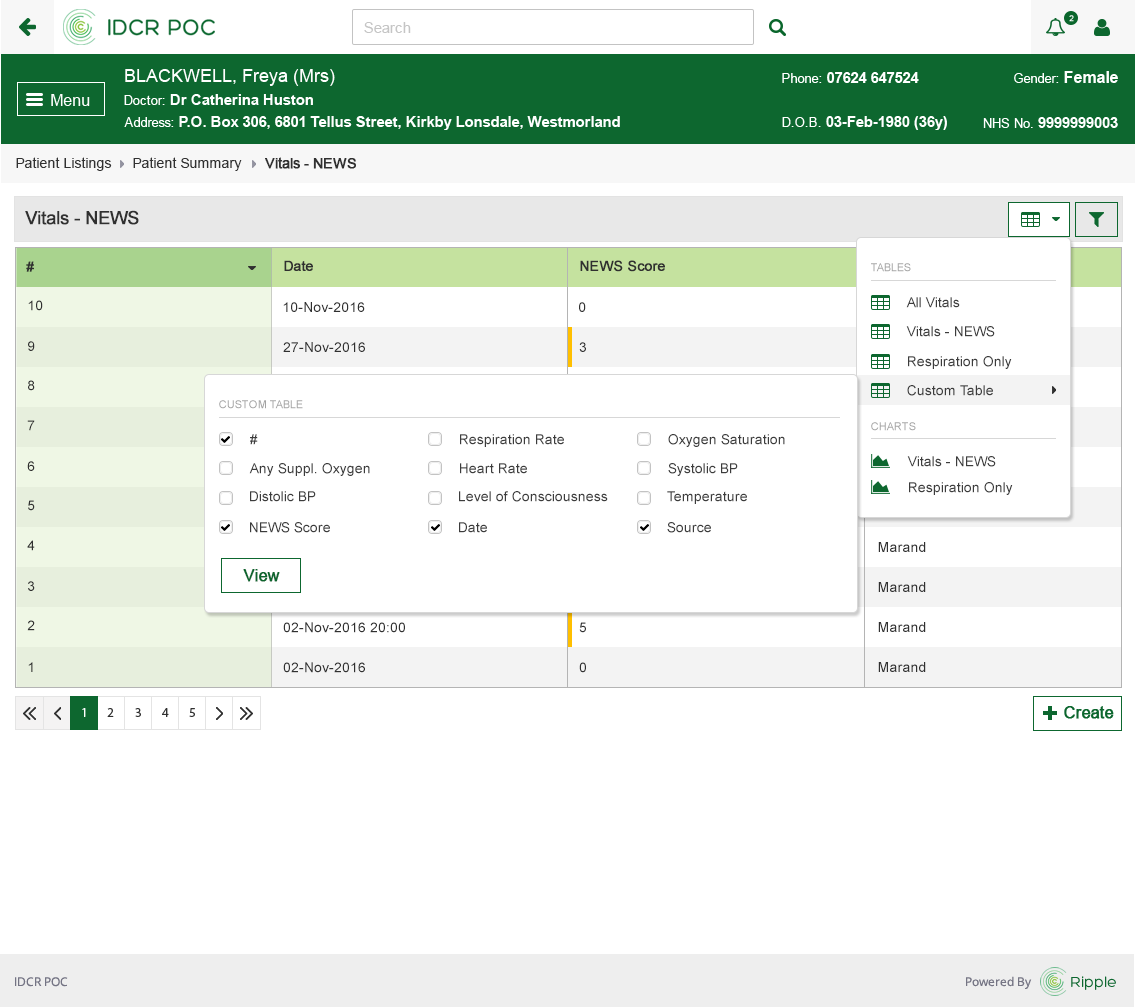
<style>
.page{position:relative;width:1135px;height:1007px;background:#ffffff}
.page>*{position:absolute;margin:0}
.t1{font:14px "ArialMT";color:#313131}
.t2{font:14px "ArialMT";color:#313131;font-weight:bold}
.t3{font:18px "ArialMT";color:#303030;font-weight:bold}
.t4{font:14px "ArialMT";color:#303030;font-weight:bold}
.t5{font:11px "ArialMT";color:#a3a3a3}
.t6{font:14px "ArialMT";color:#303030}
.t7{font:14px "ArialMT";color:#3c3c3c}
.t8{font:16px "ArialMT";color:#0c662e;font-weight:bold}
</style>
<div class="page">
<p class="t1" style="left:16px;top:157px;width:96px;height:14px">Patient Listings</p>
<p class="t1" style="left:133px;top:157px;width:109px;height:14px">Patient Summary</p>
<p class="t2" style="left:265px;top:157px;width:91px;height:12px">Vitals - NEWS</p>
<p class="t3" style="left:25px;top:210px;width:114px;height:15px">Vitals - NEWS</p>
<p class="t4" style="left:26px;top:261px;width:8px;height:11px">#</p>
<p class="t4" style="left:284px;top:260px;width:29px;height:11px">Date</p>
<p class="t4" style="left:580px;top:260px;width:85px;height:12px">NEWS Score</p>
<p class="t5" style="left:871px;top:263px;width:40px;height:9px">TABLES</p>
<p class="t6" style="left:28px;top:300px;width:15px;height:11px">10</p>
<p class="t6" style="left:283px;top:302px;width:82px;height:10px">10-Nov-2016</p>
<p class="t6" style="left:579px;top:302px;width:7px;height:10px">0</p>
<p class="t7" style="left:906px;top:297px;width:54px;height:11px">All Vitals</p>
<p class="t7" style="left:906px;top:326px;width:89px;height:11px">Vitals - NEWS</p>
<p class="t6" style="left:28px;top:341px;width:7px;height:10px">9</p>
<p class="t6" style="left:283px;top:342px;width:82px;height:10px">27-Nov-2016</p>
<p class="t6" style="left:579px;top:342px;width:7px;height:10px">3</p>
<p class="t7" style="left:908px;top:356px;width:104px;height:13px">Respiration Only</p>
<p class="t6" style="left:28px;top:380px;width:7px;height:11px">8</p>
<p class="t7" style="left:907px;top:385px;width:86px;height:11px">Custom Table</p>
<p class="t7" style="left:907px;top:385px;width:86px;height:11px">Custom Table</p>
<p class="t5" style="left:219px;top:400px;width:84px;height:9px">CUSTOM TABLE</p>
<p class="t6" style="left:27px;top:420px;width:8px;height:11px">7</p>
<p class="t5" style="left:871px;top:422px;width:45px;height:9px">CHARTS</p>
<p class="t7" style="left:250px;top:434px;width:8px;height:11px">#</p>
<p class="t7" style="left:460px;top:434px;width:104px;height:13px">Respiration Rate</p>
<p class="t7" style="left:668px;top:434px;width:117px;height:13px">Oxygen Saturation</p>
<p class="t6" style="left:27px;top:461px;width:8px;height:10px">6</p>
<p class="t7" style="left:907px;top:456px;width:89px;height:11px">Vitals - NEWS</p>
<p class="t7" style="left:249px;top:463px;width:121px;height:13px">Any Suppl. Oxygen</p>
<p class="t7" style="left:460px;top:463px;width:67px;height:11px">Heart Rate</p>
<p class="t7" style="left:668px;top:463px;width:70px;height:13px">Systolic BP</p>
<p class="t7" style="left:909px;top:482px;width:104px;height:13px">Respiration Only</p>
<p class="t7" style="left:250px;top:491px;width:66px;height:11px">Distolic BP</p>
<p class="t7" style="left:459px;top:491px;width:149px;height:11px">Level of Consciousness</p>
<p class="t7" style="left:667px;top:491px;width:80px;height:13px">Temperature</p>
<p class="t6" style="left:28px;top:500px;width:7px;height:11px">5</p>
<p class="t7" style="left:250px;top:522px;width:80px;height:11px">NEWS Score</p>
<p class="t7" style="left:459px;top:522px;width:28px;height:11px">Date</p>
<p class="t7" style="left:667px;top:522px;width:44px;height:11px">Source</p>
<p class="t6" style="left:27px;top:540px;width:8px;height:11px">4</p>
<p class="t6" style="left:878px;top:542px;width:48px;height:10px">Marand</p>
<p class="t8" style="left:243px;top:569px;width:37px;height:13px">View</p>
<p class="t6" style="left:28px;top:581px;width:7px;height:10px">3</p>
<p class="t6" style="left:878px;top:582px;width:48px;height:10px">Marand</p>
<p class="t6" style="left:27px;top:620px;width:8px;height:11px">2</p>
<p class="t6" style="left:283px;top:622px;width:122px;height:11px">02-Nov-2016 20:00</p>
<p class="t6" style="left:579px;top:622px;width:7px;height:11px">5</p>
<p class="t6" style="left:878px;top:622px;width:48px;height:10px">Marand</p>
<p class="t6" style="left:28px;top:662px;width:5px;height:10px">1</p>
<p class="t6" style="left:283px;top:662px;width:82px;height:11px">02-Nov-2016</p>
<p class="t6" style="left:579px;top:662px;width:7px;height:11px">0</p>
<p class="t6" style="left:878px;top:662px;width:48px;height:10px">Marand</p>
</div>
